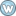
<style>
.page{position:relative;width:16px;height:16px;background:#ffffff}
.page>*{position:absolute;margin:0}
.t1{font:8.2px "SunnySide";color:#ffffff;font-variant:small-caps;font-weight:bold}
</style>
<div class="page">
<p class="t1" style="left:2px;top:5px;width:11px;height:8px">W</p>
</div>
